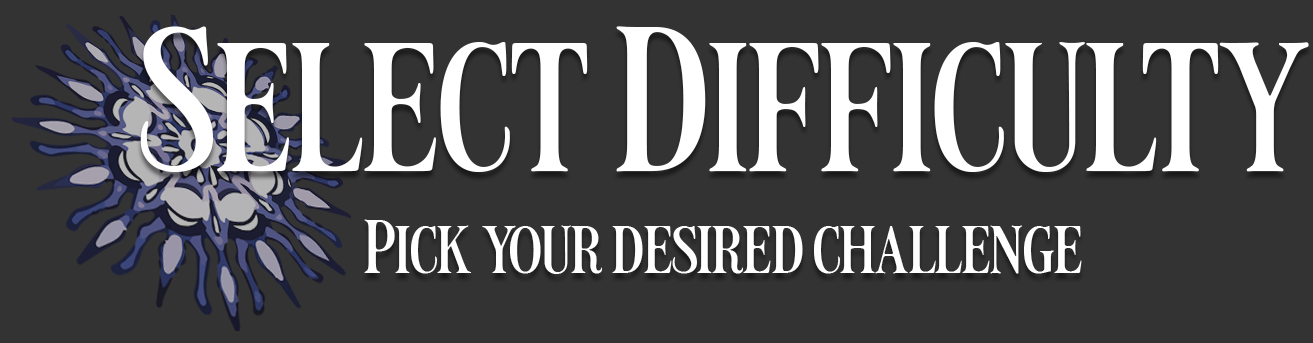
<style>
.page{position:relative;width:1313px;height:343px;background:#333333}
.page>*{position:absolute;margin:0}
.t1{font:200px "LTCarpet-Medium";color:#ffffff}
.t2{font:74.8px "LTCarpet-Medium";color:#ffffff}
</style>
<div class="page">
<p class="t1" style="left:140px;top:26px;width:1169px;height:146px">Select Difficulty</p>
<p class="t2" style="left:364px;top:219px;width:718px;height:55px">Pick your desired challenge</p>
</div>
